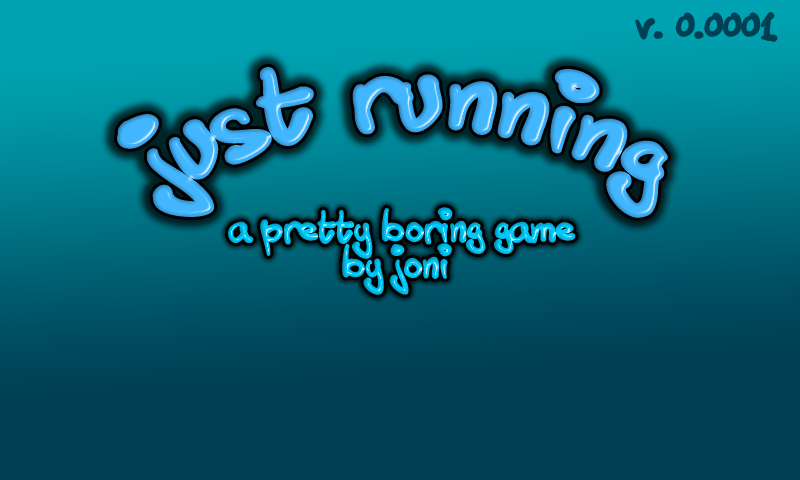
<style>
.page{position:relative;width:800px;height:480px}
.page>*{position:absolute;margin:0}
.t1{font:30px "TuschTouch1";color:#003f54}
.t2{font:72px "TuschTouch1"}
.t3{font:30px "TuschTouch1"}
</style>
<div class="page">
<p class="t1" style="left:635px;top:12px;width:143px;height:30px">v. 0.0001</p>
<p class="t2" style="left:117px;top:67px;width:551px;height:151px">just running</p>
<p class="t3" style="left:228px;top:207px;width:348px;height:88px;text-align:center">a pretty boring game<br>by joni</p>
</div>
